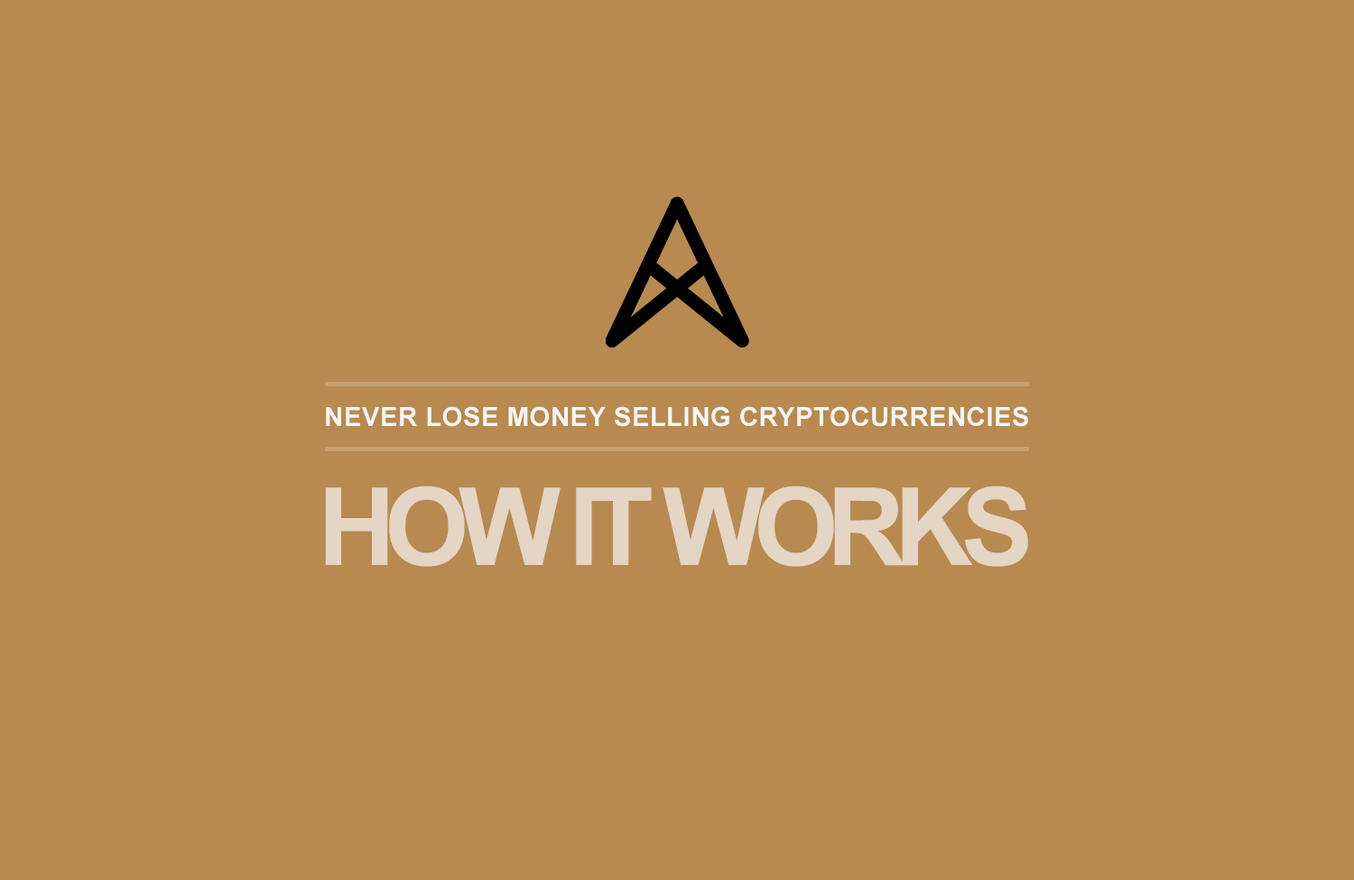
<style>
.page{position:relative;width:1354px;height:880px;background:#b88a4f}
.page>*{position:absolute;margin:0}
.t1{font:26.3px "Arial-BoldMT";letter-spacing:0.02em;color:#ffffff}
.t2{font:108.2px "Arial-BoldMT";letter-spacing:-0.1em;color:#e4d5c5}
</style>
<div class="page">
<p class="t1" style="left:326px;top:406px;width:702px;height:21px;opacity:0.9">NEVER LOSE MONEY SELLING CRYPTOCURRENCIES</p>
<p class="t2" style="left:325px;top:486px;width:703px;height:81px">HOW IT WORKS</p>
</div>
